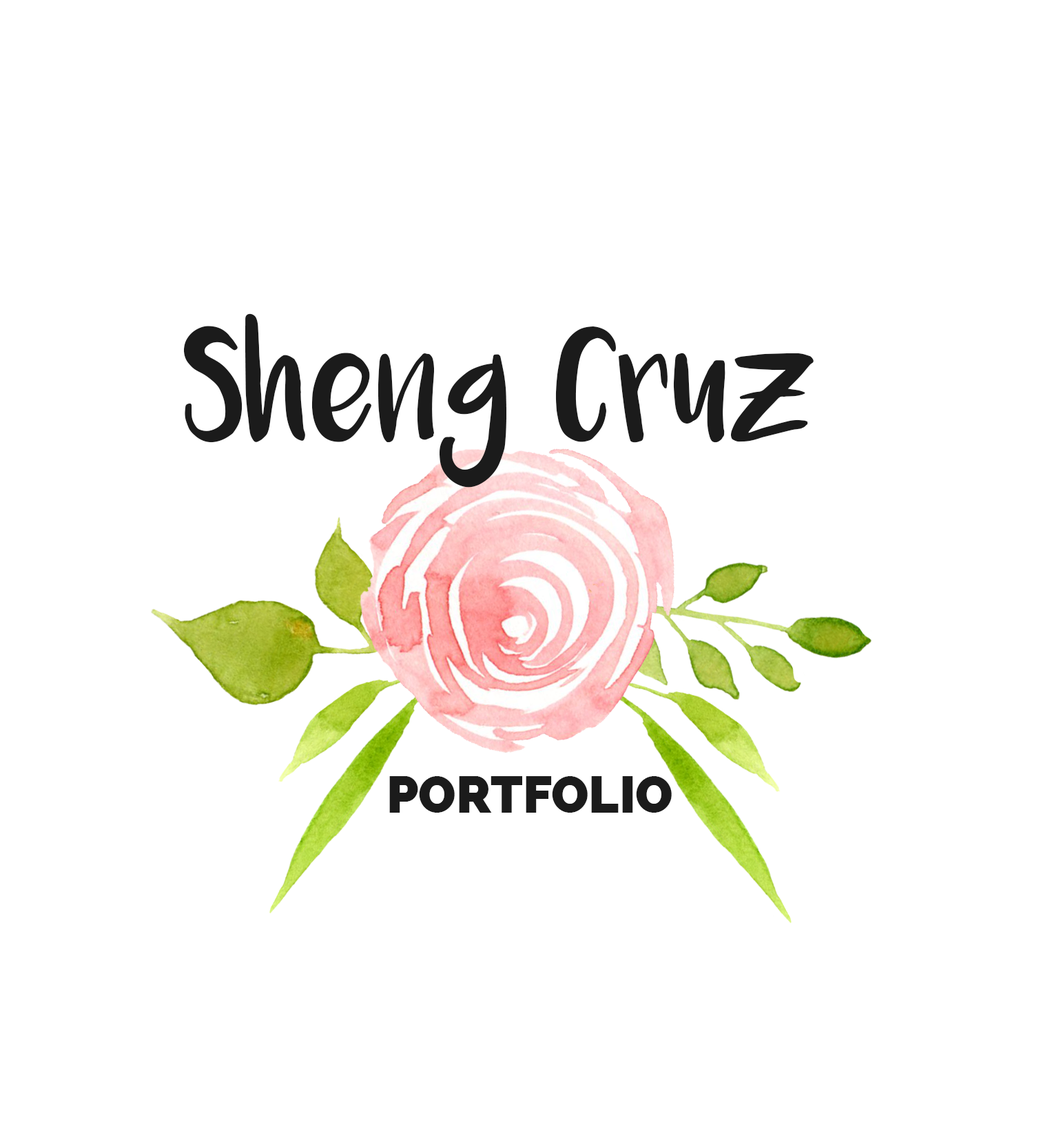
<style>
.page{position:relative;width:1041px;height:1146px;background:#ffffff}
.page>*{position:absolute;margin:0}
.t1{font:86.1px/89px "Luna";color:#1b1b1b}
.t2{font:51.6px "Raleway-Heavy";color:#1b1b1b;text-transform:uppercase}
</style>
<div class="page">
<p class="t1" style="left:184px;top:313px;width:629px;height:175px;text-align:center">Sheng Cruz</p>
<p class="t2" style="left:389px;top:776px;width:282px;height:37px">Portfolio</p>
</div>
